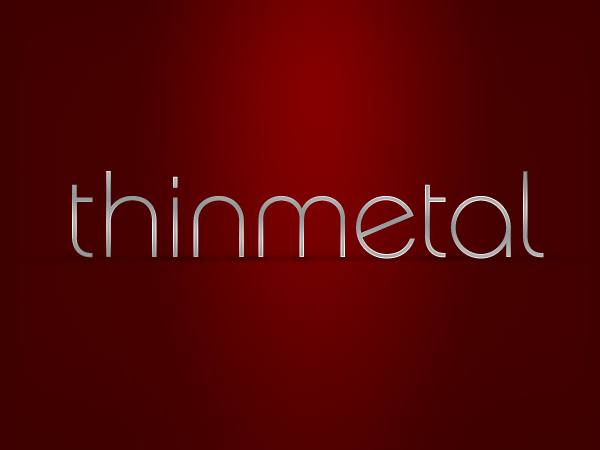
<style>
.page{position:relative;width:600px;height:450px}
.page>*{position:absolute;margin:0}
.t1{font:115.4px "Chalet-ParisNineteenSeventy";color:#a3a3a3}
</style>
<div class="page">
<p class="t1" style="left:72px;top:171px;width:472px;height:88px">thinmetal</p>
</div>
